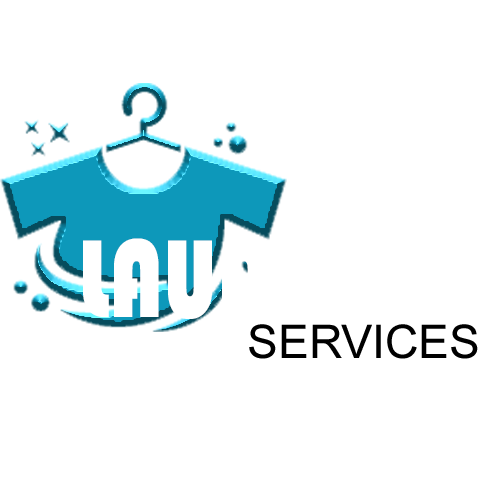
<style>
.page{position:relative;width:500px;height:500px;background:#ffffff}
.page>*{position:absolute;margin:0}
.t1{font:114.8px "Bauhaus93";color:#ffffff;scale:0.8 1}
.t2{font:46.1px "ArialMT";color:#000000}
</style>
<div class="page">
<p class="t1" style="left:83px;top:238px;width:414px;height:81px">LAUNDARY</p>
<p class="t2" style="left:249px;top:324px;width:229px;height:35px">SERVICES</p>
</div>
